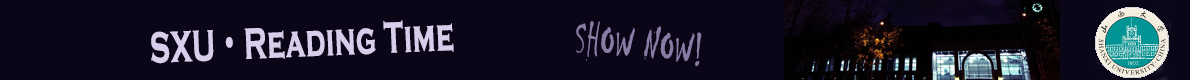
<style>
.page{position:relative;width:1190px;height:80px;background:#0a0618}
.page>*{position:absolute;margin:0}
.t1{font:45px "CopperplateGothic-Bold";color:#d6ceea;font-weight:bold;scale:0.62 1}
.t2{font:45px "AdobeHeitiStd-Regular";color:#d6ceea;font-weight:bold;scale:0.62 1}
.t3{font:49.1px "Chiller-Regular";color:#877ca4;font-weight:bold;scale:0.63 1}
</style>
<div class="page">
<p class="t1" style="left:151px;top:20px;width:303px;height:44px;rotate:-2deg">SXU<span class="t2">·</span>Reading Time</p>
<p class="t3" style="left:576px;top:21px;width:126px;height:46px;rotate:5deg">SHOW NOW!</p>
</div>
